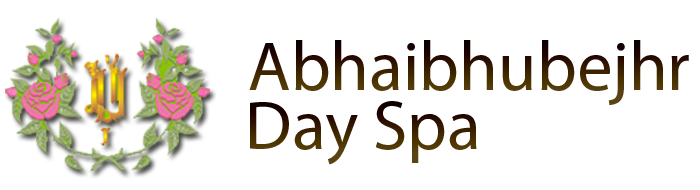
<style>
.page{position:relative;width:700px;height:190px;background:#ffffff}
.page>*{position:absolute;margin:0}
.t1{font:70px "MyriadPro-Regular"}
</style>
<div class="page">
<p class="t1" style="left:249px;top:40px;width:440px;height:65px">Abhaibhubejhr</p>
<p class="t1" style="left:250px;top:101px;width:227px;height:64px">Day Spa</p>
</div>
